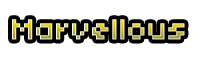
<style>
.page{position:relative;width:200px;height:60px;background:#ffffff}
.page>*{position:absolute;margin:0}
.t1{font:32px "04b03"}
</style>
<div class="page">
<p class="t1" style="left:12px;top:19px;width:173px;height:21px">Marvellous</p>
<p class="t1" style="left:12px;top:19px;width:173px;height:21px">Marvellous</p>
<p class="t1" style="left:12px;top:19px;width:173px;height:21px">Marvellous</p>
</div>
